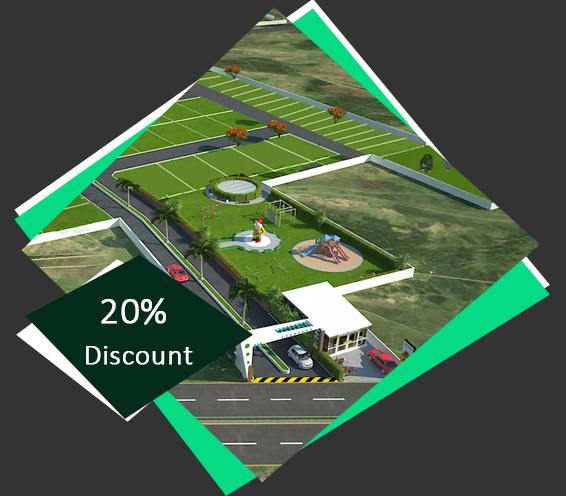
<style>
.page{position:relative;width:566px;height:496px;background:#333333}
.page>*{position:absolute;margin:0}
.t1{font:50.4px/36px "Calibri-Light";color:#ffffff;font-weight:bold}
.t2{font:64.8px/36px "Calibri-Light";color:#ffffff;font-weight:bold}
</style>
<div class="page">
<p class="t1" style="left:86px;top:298px;width:107px;height:67px;text-align:center"><span class="t2">20% <br></span>Discount</p>
</div>
